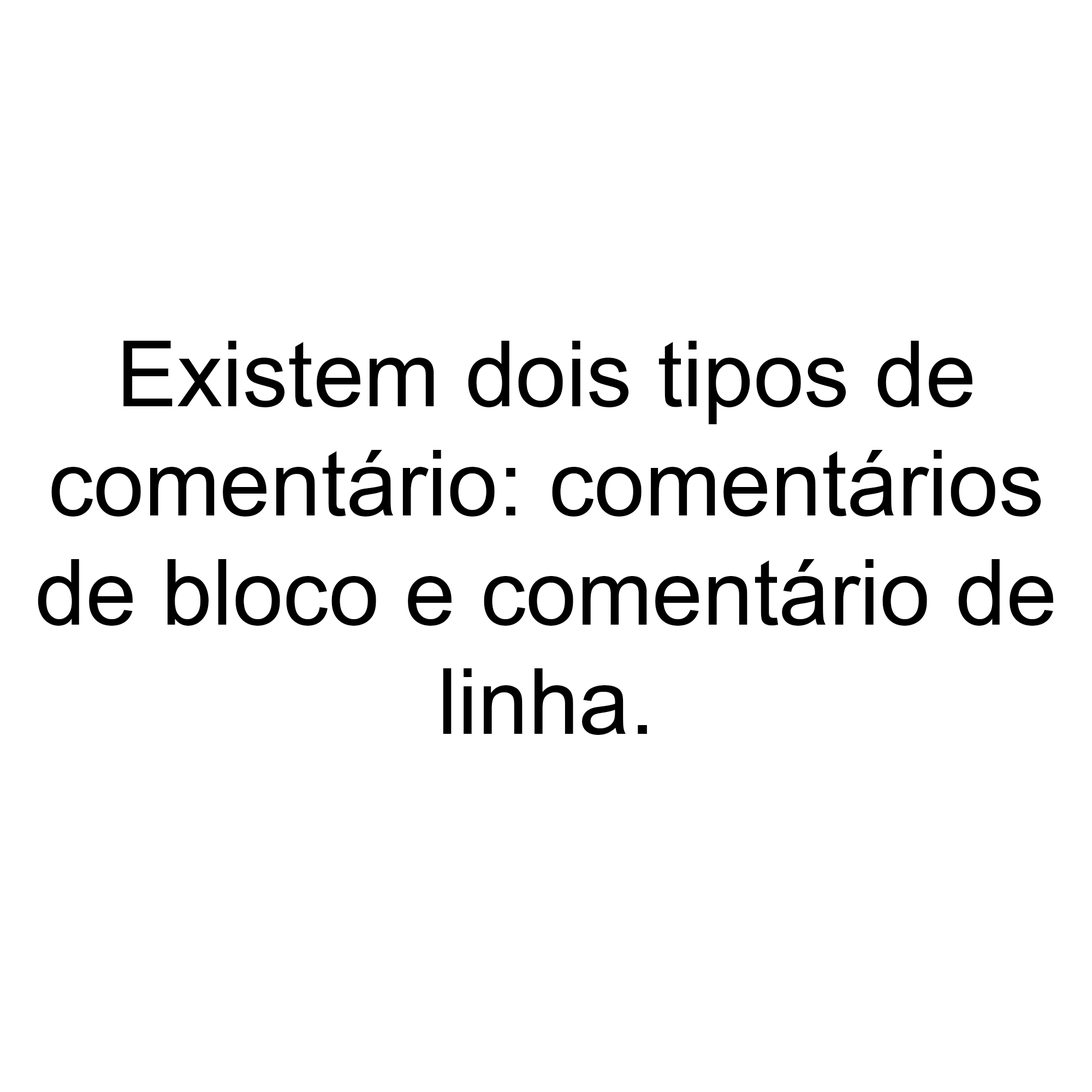
<style>
.page{position:relative;width:1092px;height:1092px;background:#ffffff}
.page>*{position:absolute;margin:0}
.t1{font:91px "ArialMT";color:#000000}
</style>
<div class="page">
<p class="t1" style="left:38px;top:341px;width:1015px;height:394px;text-align:center">Existem dois tipos de<br>comentário: comentários<br>de bloco e comentário de<br>linha.</p>
</div>
